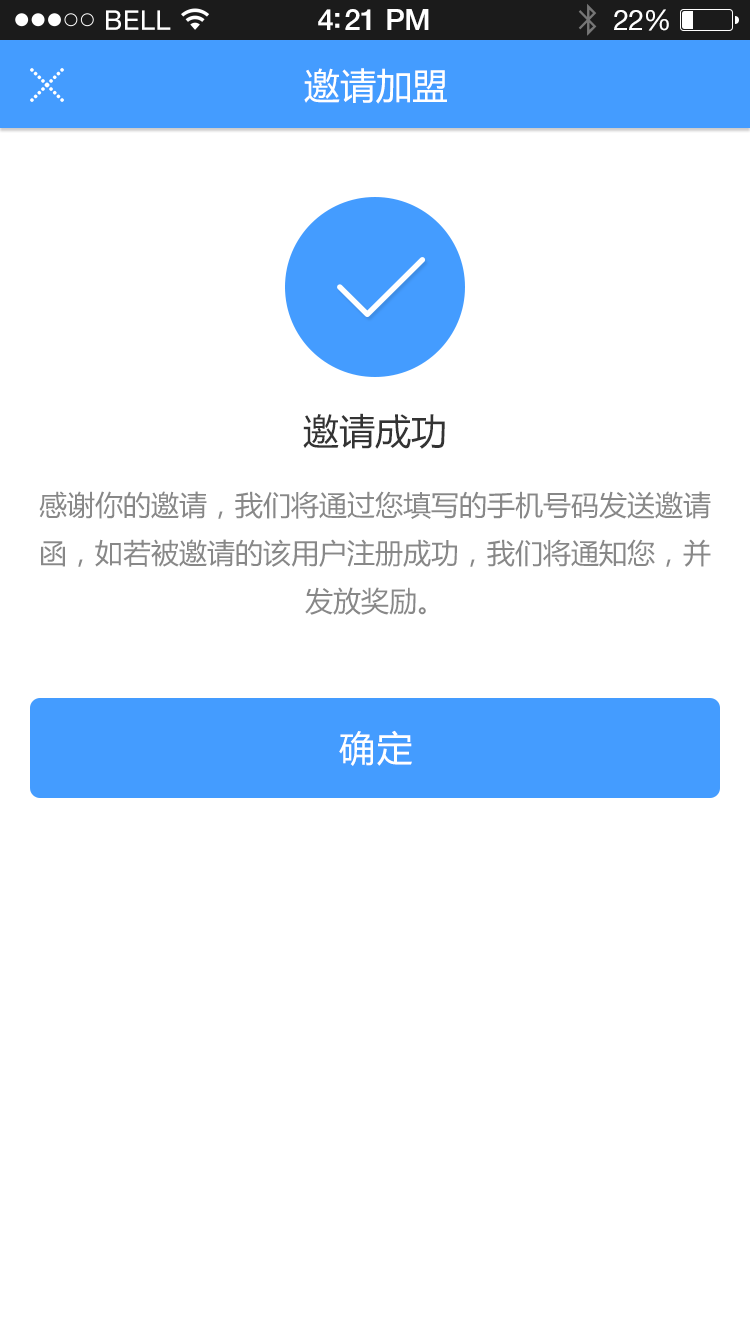
<style>
.page{position:relative;width:750px;height:1334px;background:#ffffff}
.page>*{position:absolute;margin:0}
.t1{font:36px "MicrosoftYaHei";color:#ffffff}
.t2{font:36px "MicrosoftYaHei";color:#333333}
.t3{font:28px/48px "MicrosoftYaHei";color:#888888}
.t4{font:36px "MicrosoftYaHei";letter-spacing:0.05em;color:#ffffff}
</style>
<div class="page">
<p class="t1" style="left:304px;top:68px;width:143px;height:36px">邀请加盟</p>
<p class="t2" style="left:303px;top:413px;width:142px;height:36px">邀请成功</p>
<p class="t3" style="left:39px;top:491px;width:672px;height:124px;text-align:center">感谢你的邀请，我们将通过您填写的手机号码发送邀请<br>函，如若被邀请的该用户注册成功，我们将通知您，并<br>发放奖励。</p>
<p class="t4" style="left:339px;top:730px;width:73px;height:36px">确定</p>
</div>
